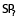
<style>
.page{position:relative;width:16px;height:16px;background:#ffffff}
.page>*{position:absolute;margin:0}
.t1{font:12px "MyriadPro-Regular";color:#000000}
.t2{font:8px "MyriadPro-Regular";color:#000000}
</style>
<div class="page">
<p class="t1" style="left:2px;top:4px;width:12px;height:9px">SP</p>
<p class="t2" style="left:12px;top:10px;width:4px;height:6px">?</p>
</div>
